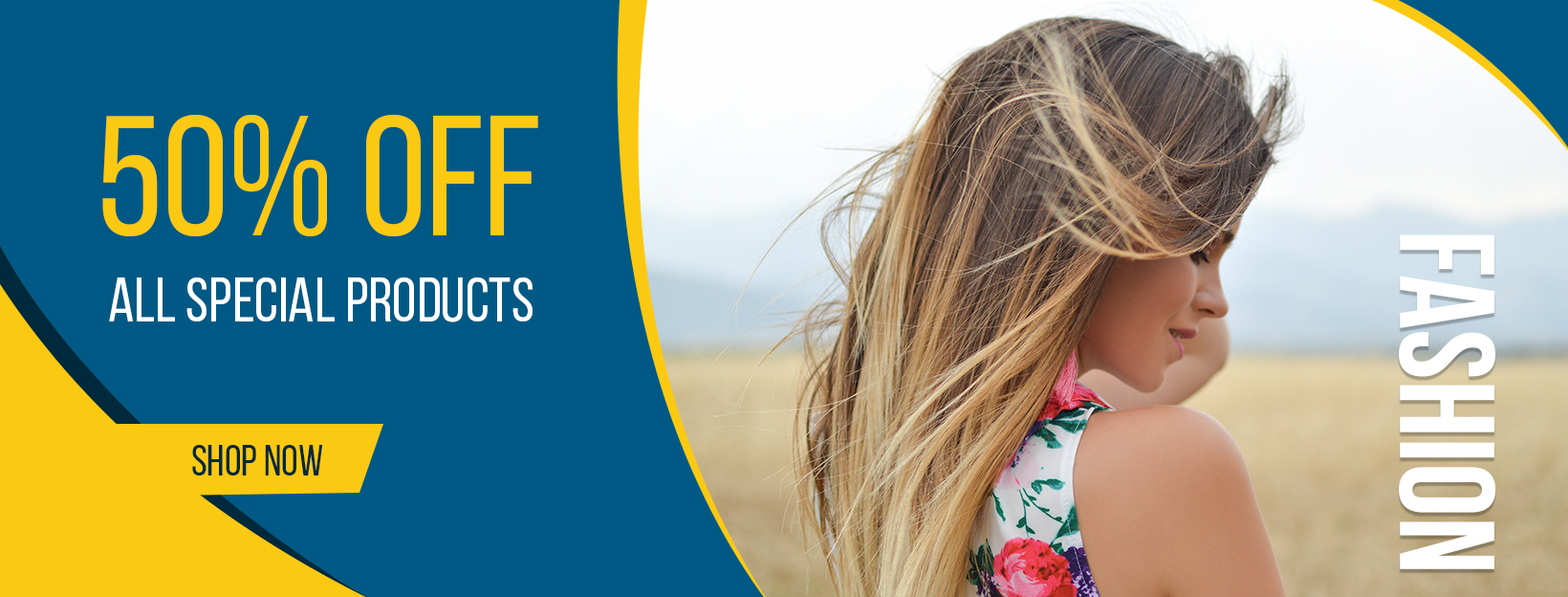
<style>
.page{position:relative;width:1568px;height:597px;background:#005985}
.page>*{position:absolute;margin:0}
.t1{font:170.2px "BebasNeueRegular";color:#fbc912;text-transform:uppercase}
.t2{font:134.8px "BebasNeueBold";color:#ffffff;text-transform:uppercase}
.t3{font:62.1px "BebasNeueRegular";color:#ffffff;text-transform:uppercase}
.t4{font:43px "BebasNeueRegular";color:#00293b;text-transform:uppercase}
</style>
<div class="page">
<p class="t1" style="left:102px;top:114px;width:436px;height:123px">50% OFF</p>
<p class="t2" style="left:1399px;top:234px;width:97px;height:335px;rotate:90deg">FAshion</p>
<p class="t3" style="left:109px;top:277px;width:424px;height:45px">all special products</p>
<p class="t4" style="left:192px;top:445px;width:131px;height:30px">Shop now</p>
</div>
